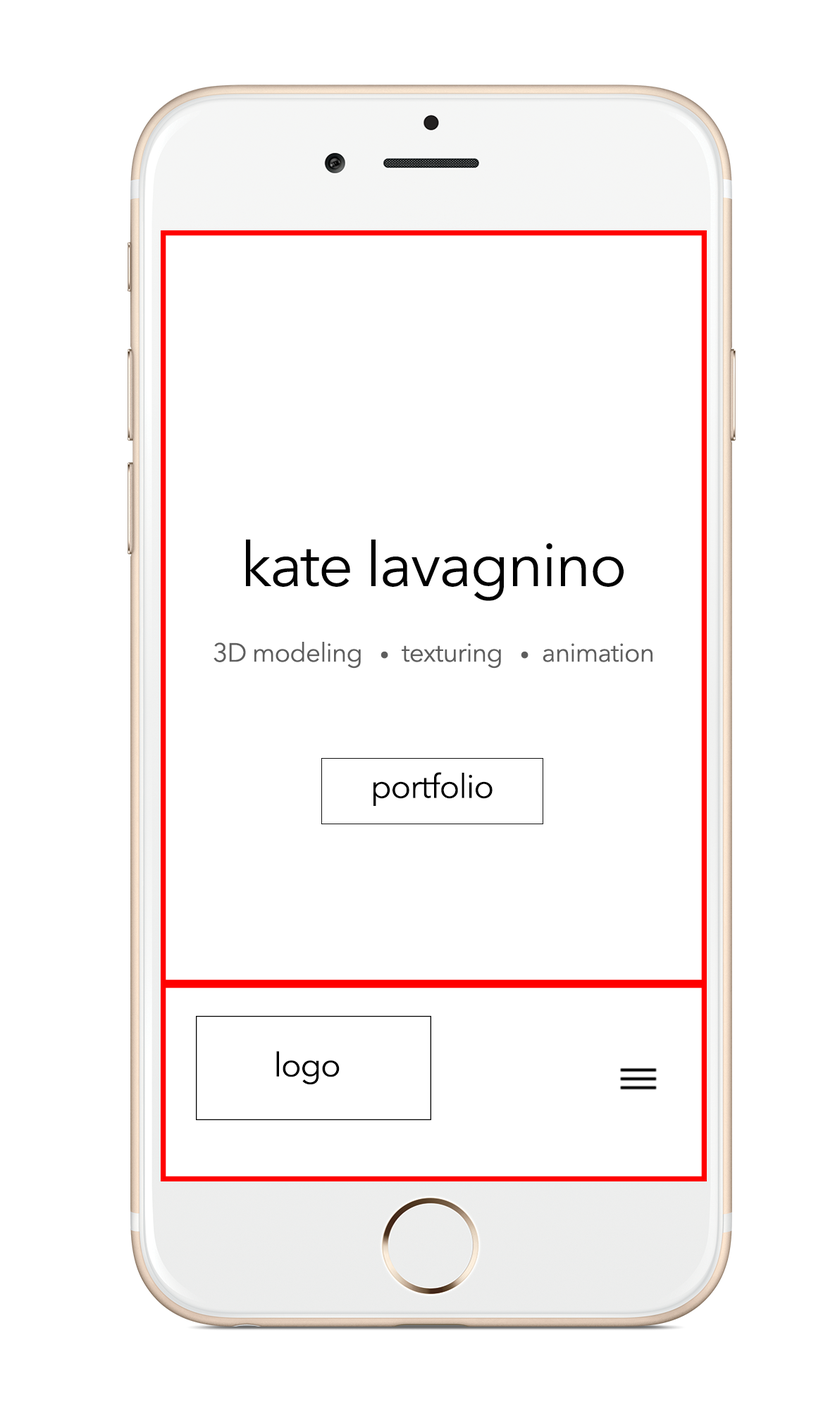
<style>
.page{position:relative;width:835px;height:1428px;background:#ffffff}
.page>*{position:absolute;margin:0}
.t1{font:61.3px "AvenirNext-Regular";letter-spacing:-0.025em;color:#010101}
.t2{font:26.1px/2.1px "AvenirNext-Regular";letter-spacing:-0.025em;color:#5e5e5e}
.t3{font:19px/2.1px "AvenirNext-Regular";letter-spacing:-0.025em;color:#5e5e5e}
.t4{font:33.1px "AvenirNext-Regular";letter-spacing:-0.025em;color:#000000}
</style>
<div class="page">
<p class="t1" style="left:213px;top:539px;width:439px;height:130px;text-align:center">kate lavagnino<br><br><span class="t2">3D modeling   </span><span class="t3">•   </span><span class="t2">texturing   </span><span class="t3">•   </span><span class="t2">animation</span></p>
<p class="t4" style="left:373px;top:772px;width:120px;height:34px">portfolio</p>
<p class="t4" style="left:276px;top:1051px;width:64px;height:34px">logo</p>
</div>
